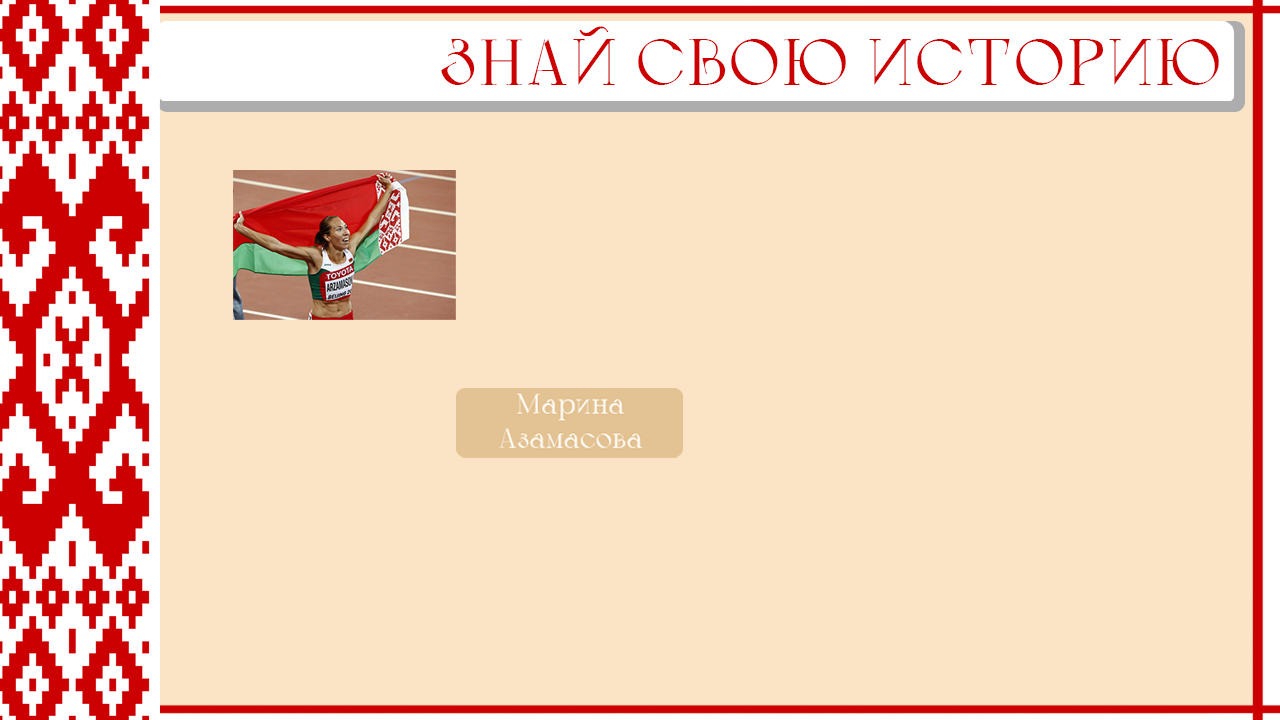
<style>
.page{position:relative;width:1280px;height:720px;background:#fae4c5}
.page>*{position:absolute;margin:0}
.t1{font:65px "Calypso-Regular";color:#cc0000}
</style>
<div class="page">
<p class="t1" style="left:441px;top:26px;width:778px;height:59px">ЗНАЙ СВОЮ ИСТОРИЮ</p>
</div>
